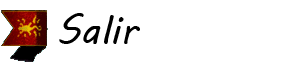
<style>
.page{position:relative;width:300px;height:70px;background:#ffffff}
.page>*{position:absolute;margin:0}
.t1{font:40px "MVBoli";color:#000000}
</style>
<div class="page">
<p class="t1" style="left:59px;top:13px;width:81px;height:31px">Salir</p>
</div>
